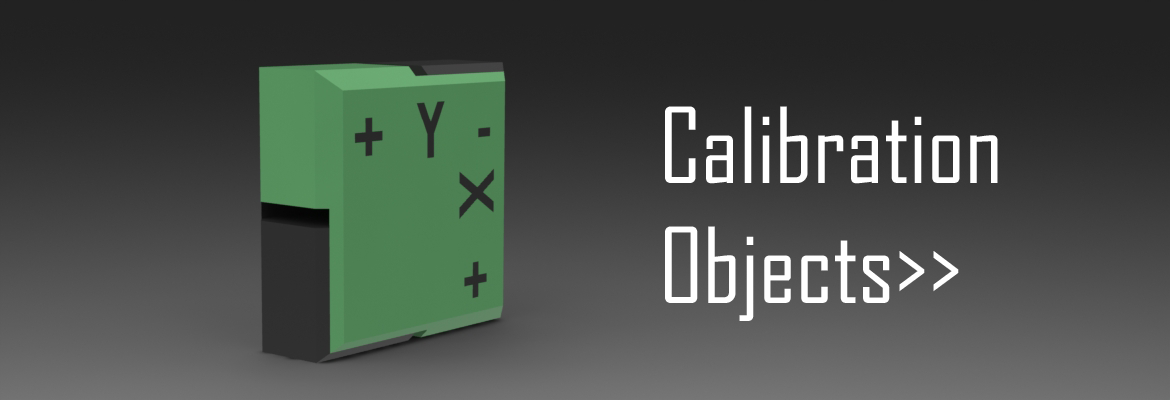
<style>
.page{position:relative;width:1170px;height:400px}
.page>*{position:absolute;margin:0}
.t1{font:100px "AgencyFB-Reg";color:#ffffff}
</style>
<div class="page">
<p class="t1" style="left:665px;top:106px;width:333px;height:215px">Calibration<br>Objects&gt;&gt;</p>
</div>
